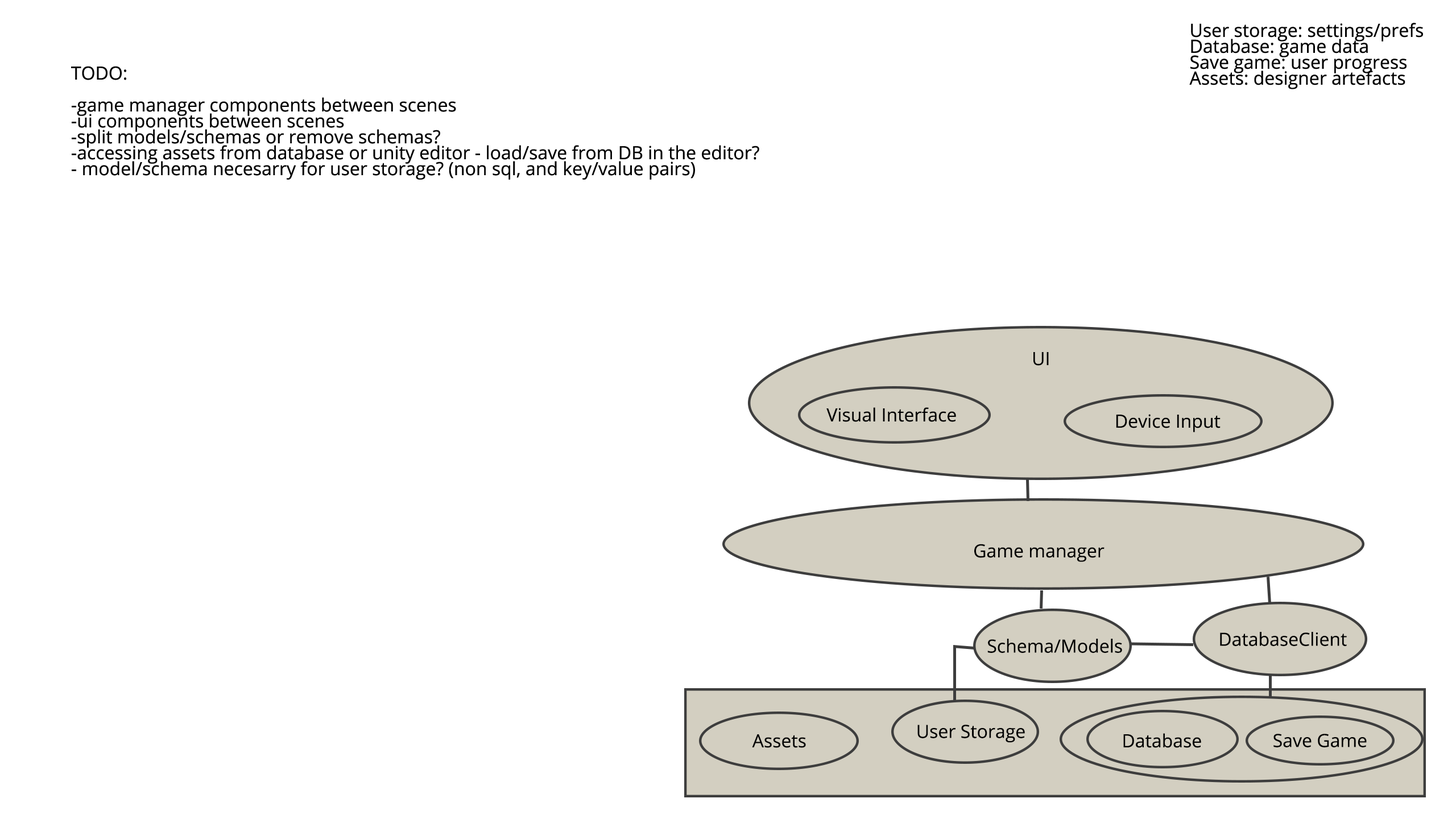
<style>
.page{position:relative;width:1456px;height:819px;background:#ffffff}
.page>*{position:absolute;margin:0}
.t1{font:18.2px/15.9px "OpenSans";color:#000000}
.t2{font:18.2px "OpenSans";color:#000000}
</style>
<div class="page">
<p class="t1" style="left:1189px;top:23px;width:234px;height:66px">User storage: settings/prefs<br>Database: game data<br>Save game: user progress<br>Assets: designer artefacts</p>
<p class="t1" style="left:71px;top:66px;width:688px;height:114px">TODO:<br><br>-game manager components between scenes<br>-ui components between scenes<br>-split models/schemas or remove schemas?<br>-accessing assets from database or unity editor - load/save from DB in the editor?<br>- model/schema necesarry for user storage? (non sql, and key/value pairs)</p>
<p class="t2" style="left:1033px;top:352px;width:16px;height:14px">UI</p>
<p class="t2" style="left:826px;top:407px;width:130px;height:15px">Visual Interface</p>
<p class="t2" style="left:1116px;top:414px;width:105px;height:18px">Device Input</p>
<p class="t2" style="left:974px;top:544px;width:130px;height:18px">Game manager</p>
<p class="t2" style="left:987px;top:639px;width:135px;height:14px">Schema/Models</p>
<p class="t2" style="left:1220px;top:632px;width:127px;height:14px">DatabaseClient</p>
<p class="t2" style="left:917px;top:725px;width:108px;height:18px">User Storage</p>
<p class="t2" style="left:752px;top:734px;width:54px;height:14px">Assets</p>
<p class="t2" style="left:1123px;top:733px;width:78px;height:15px">Database</p>
<p class="t2" style="left:1273px;top:734px;width:94px;height:13px">Save Game</p>
</div>
